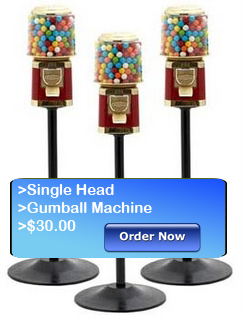
<style>
.page{position:relative;width:242px;height:319px;background:#ffffff}
.page>*{position:absolute;margin:0}
.t1{font:15px "ArialRoundedMTBold";color:#ffffff}
</style>
<div class="page">
<p class="t1" style="left:18px;top:184px;width:134px;height:50px">&gt;Single Head  <br>&gt;Gumball Machine<br>&gt;$30.00</p>
</div>
